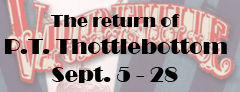
<style>
.page{position:relative;width:240px;height:92px}
.page>*{position:absolute;margin:0}
.t1{font:18px "Broadway";color:#000000}
.t2{font:22px "Broadway";color:#000000}
</style>
<div class="page">
<p class="t1" style="left:0px;top:12px;width:231px;height:32px;text-align:center">The return of</p>
<p class="t2" style="left:4px;top:63px;width:222px;height:31px">Sept. 5 - 28</p>
</div>
